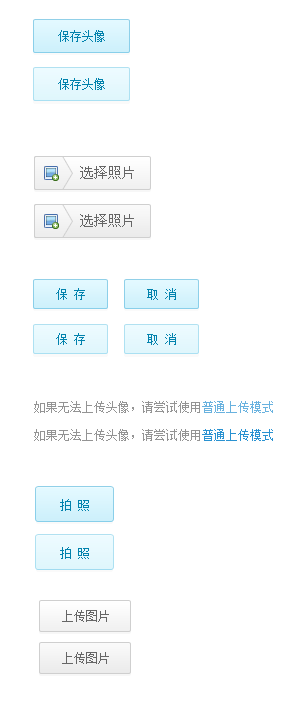
<style>
.page{position:relative;width:299px;height:706px;background:#ffffff}
.page>*{position:absolute;margin:0}
.t1{font:12px "SimSun";color:#0182ad}
.t2{font:14px "SimSun";color:#666666}
.t3{font:12px "SimSun"}
.t4{font:12px "SimSun";color:#949494}
.t5{font:12px "SimSun";color:#2a92d1}
.t6{font:12px "SimSun";color:#666666}
</style>
<div class="page">
<p class="t1" style="left:58px;top:30px;width:47px;height:12px">保存头像</p>
<p class="t1" style="left:58px;top:78px;width:47px;height:12px">保存头像</p>
<p class="t2" style="left:80px;top:166px;width:54px;height:13px">选择照片</p>
<p class="t2" style="left:80px;top:214px;width:54px;height:13px">选择照片</p>
<p class="t1" style="left:56px;top:288px;width:29px;height:12px">保 存</p>
<p class="t1" style="left:147px;top:288px;width:29px;height:12px">取 消</p>
<p class="t1" style="left:56px;top:333px;width:29px;height:12px">保 存</p>
<p class="t1" style="left:147px;top:333px;width:29px;height:12px">取 消</p>
<p class="t3" style="left:34px;top:401px;width:239px;height:12px">如果无法上传头像，请尝试使用普通上传模式</p>
<p class="t4" style="left:34px;top:429px;width:239px;height:12px">如果无法上传头像，请尝试使用<span class="t5">普通上传模式</span></p>
<p class="t1" style="left:60px;top:499px;width:29px;height:12px">拍 照</p>
<p class="t1" style="left:60px;top:547px;width:29px;height:12px">拍 照</p>
<p class="t6" style="left:62px;top:610px;width:47px;height:12px">上传图片</p>
<p class="t6" style="left:62px;top:652px;width:47px;height:12px">上传图片</p>
</div>
